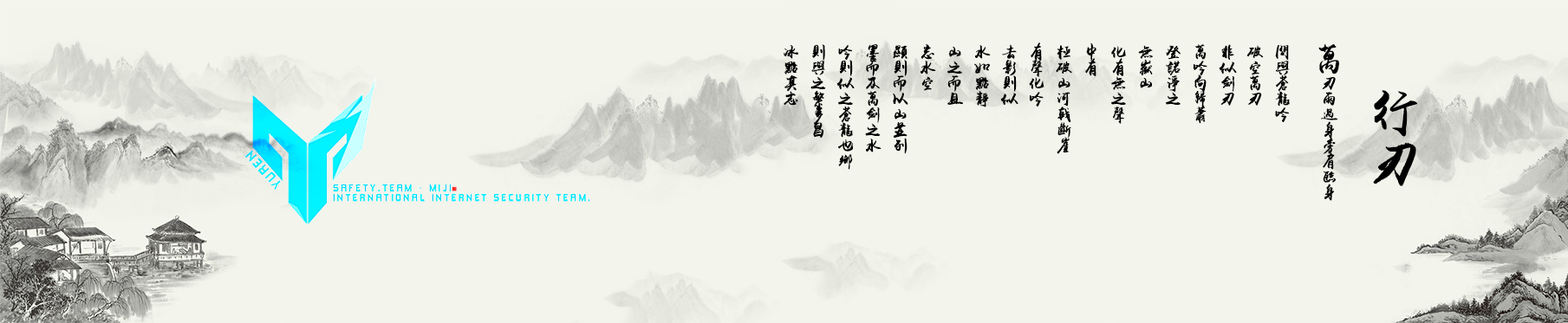
<style>
.page{position:relative;width:1568px;height:323px;background:#f3f4ec}
.page>*{position:absolute;margin:0}
.t1{font:15.6px "yuweijmfx";color:#000000;font-weight:bold}
.t2{font:31.2px "yuweijmfx";color:#000000;font-weight:bold}
.t3{font:52px "yuweijmfx";color:#000000;font-weight:bold}
</style>
<div class="page">
<p class="t1" style="left:784px;top:42px;width:555px;height:159px"><span class="t2">万</span>刃雨过身旁肩临身<br>问与苍龙吟<br>破空万刃<br>非似剑刃<br>万吟向归萧<br>登诺净之<br>无岳山 <br>化有无之声<br>中有<br>极破山河戟断崖<br>有声化吟<br>去影则似<br>水如点静<br>山之而且<br>忘水空<br>显则而以山并列<br>墨而及万剑之水<br>吟则似之苍龙也乡<br>则与之繁多昌<br>冰点其志</p>
<p class="t3" style="left:1373px;top:90px;width:44px;height:96px">行刃</p>
</div>
